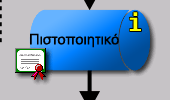
<style>
.page{position:relative;width:170px;height:100px;background:#c6c3c6}
.page>*{position:absolute;margin:0}
.t1{font:14.7px "ArialMT";color:#000000}
</style>
<div class="page">
<p class="t1" style="left:30px;top:33px;width:89px;height:15px">Πιστοποιητικό</p>
</div>
